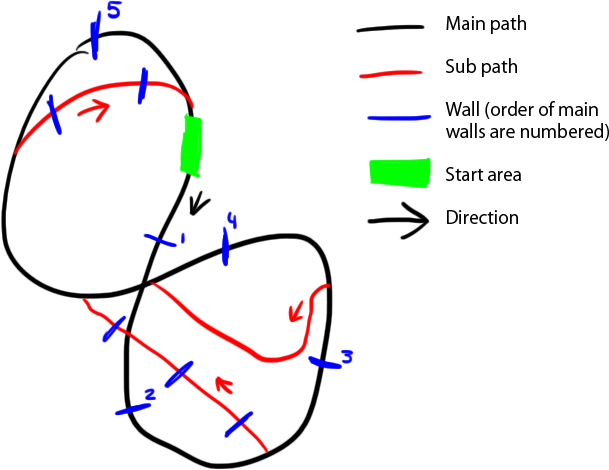
<style>
.page{position:relative;width:609px;height:470px;background:#ffffff}
.page>*{position:absolute;margin:0}
.t1{font:18px "KozGoPr6N-Regular";color:#010101}
</style>
<div class="page">
<p class="t1" style="left:445px;top:15px;width:164px;height:209px">Main path<br><br>Sub path<br><br>Wall (order of main<br>walls are numbered)<br><br>Start area<br><br>Direction</p>
</div>
